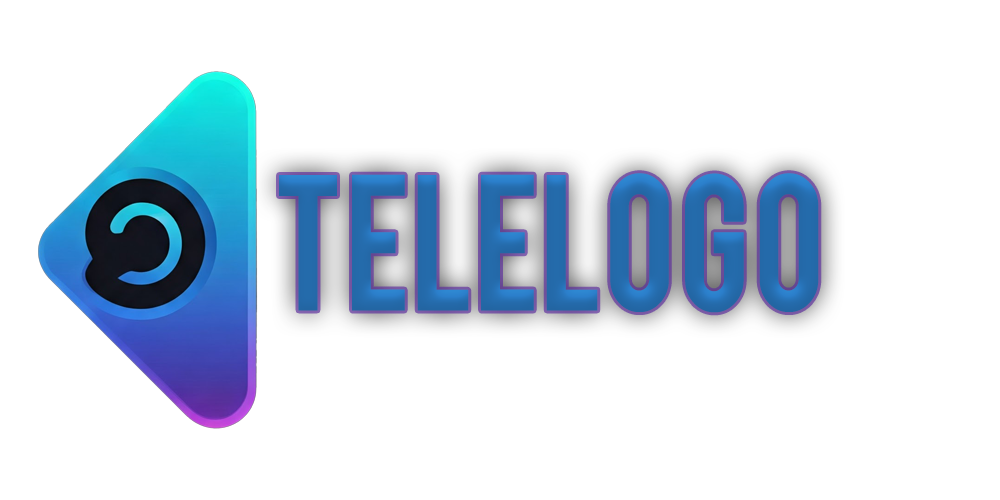
<style>
.page{position:relative;width:1000px;height:500px;background:#ffffff}
.page>*{position:absolute;margin:0}
.t1{font:151.6px "Bebas";letter-spacing:-0.02em;color:#246aaa;font-weight:bold;scale:0.9 1}
</style>
<div class="page">
<p class="t1" style="left:279px;top:173px;width:540px;height:140px">TeleLogo</p>
</div>
